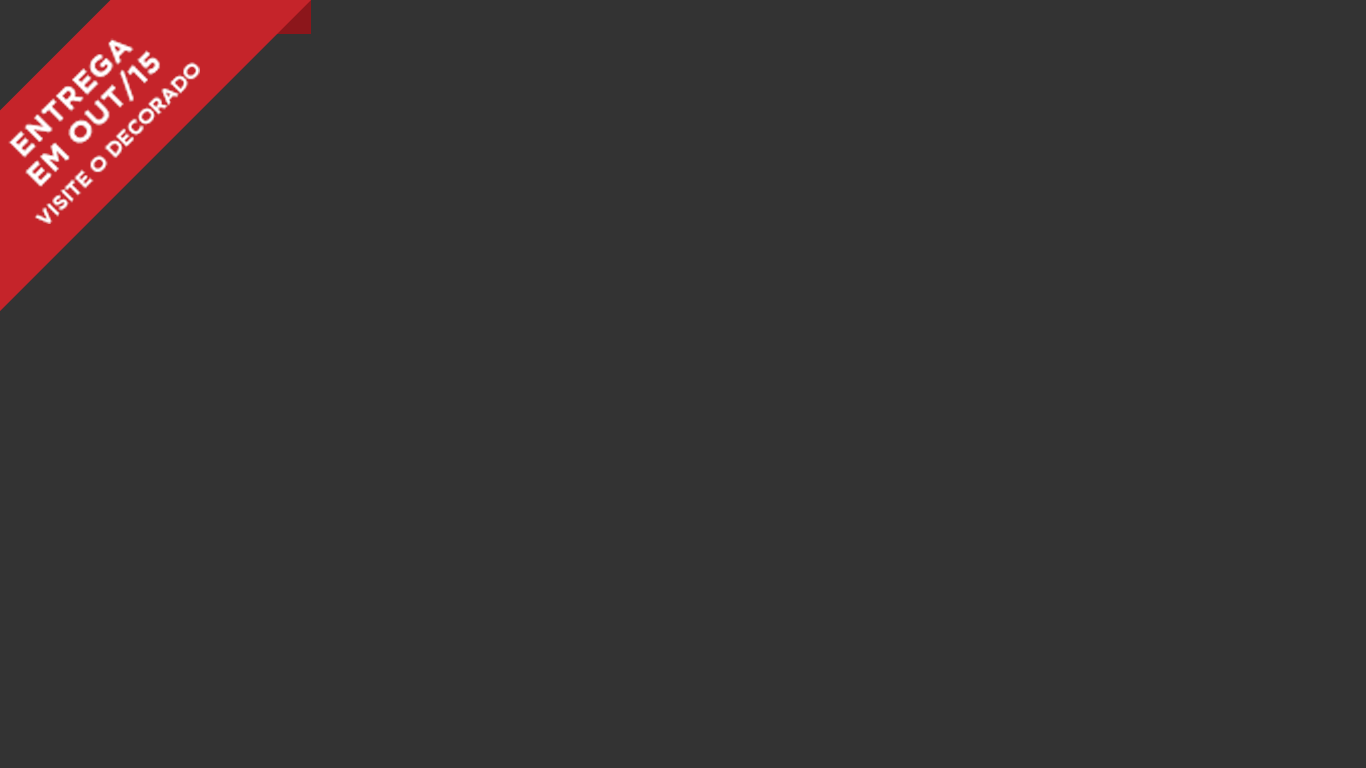
<style>
.page{position:relative;width:1366px;height:768px;background:#333333}
.page>*{position:absolute;margin:0}
.t1{font:30.3px/32.3px "GothamBold";letter-spacing:0.019em;color:#ffffff;text-transform:uppercase}
.t2{font:20.2px/32.3px "GothamBold";color:#ffffff;text-transform:uppercase}
</style>
<div class="page">
<p class="t1" style="left:8px;top:38px;width:192px;height:186px;text-align:center;rotate:-45deg">entrega<br>em out/15<br><span class="t2">VISITE O DECORADO</span></p>
</div>
